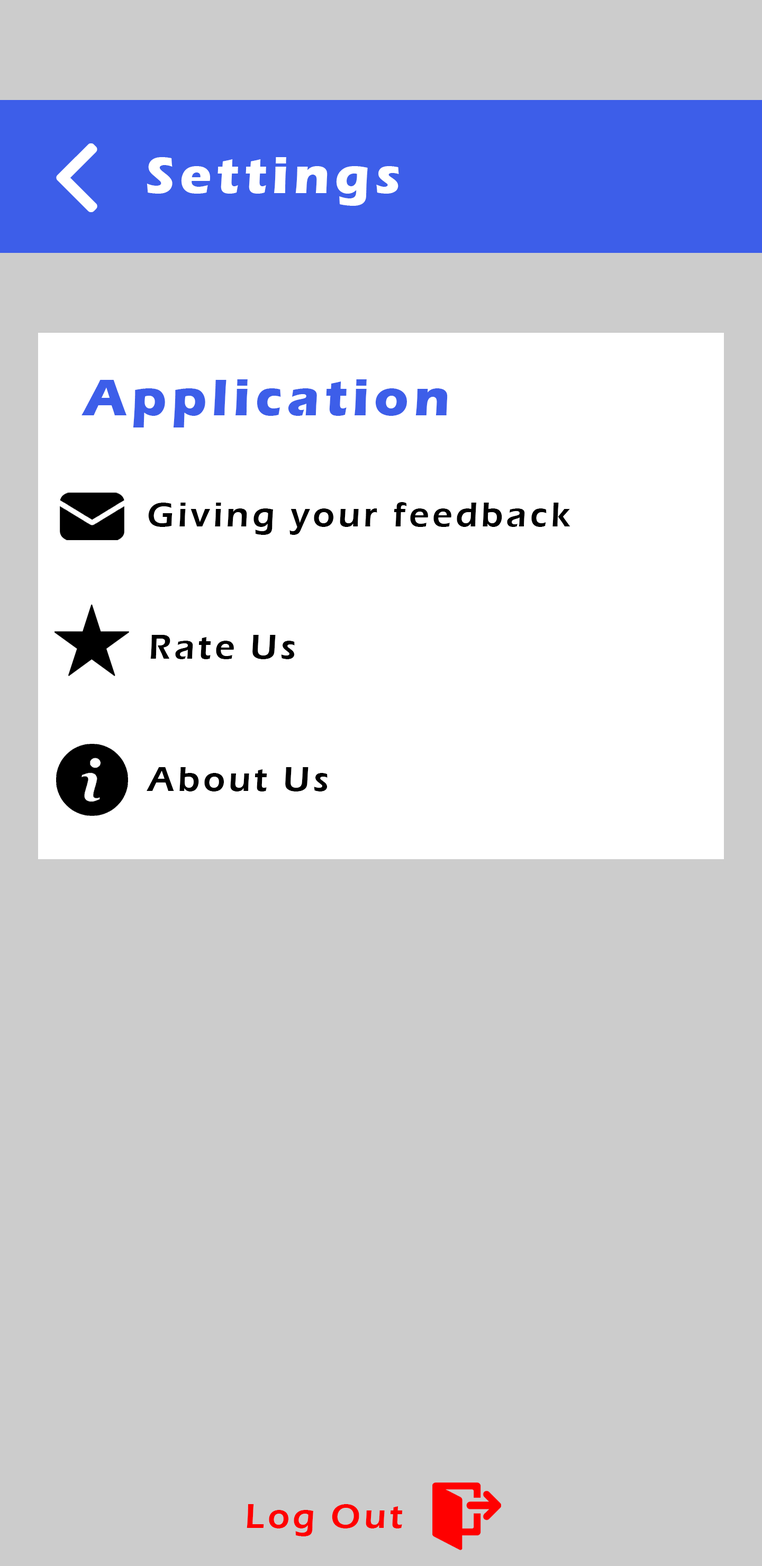
<style>
.page{position:relative;width:762px;height:1566px;background:#cccccc}
.page>*{position:absolute;margin:0}
.t1{font:52.9px "ErasITC-Bold";letter-spacing:0.1em;color:#ffffff}
.t2{font:52.9px "ErasITC-Bold";letter-spacing:0.1em;color:#3d5ee9}
.t3{font:35.3px "ErasITC-Demi";letter-spacing:0.1em;color:#000000}
.t4{font:35.3px "ErasITC-Demi";letter-spacing:0.1em;color:#ff0000}
</style>
<div class="page">
<p class="t1" style="left:147px;top:157px;width:252px;height:49px">Settings</p>
<p class="t2" style="left:81px;top:379px;width:366px;height:48px">Application</p>
<p class="t3" style="left:148px;top:502px;width:422px;height:33px">Giving your feedback</p>
<p class="t3" style="left:150px;top:635px;width:145px;height:24px">Rate Us</p>
<p class="t3" style="left:147px;top:767px;width:180px;height:24px">About Us</p>
<p class="t4" style="left:246px;top:1504px;width:157px;height:32px">Log Out</p>
</div>
